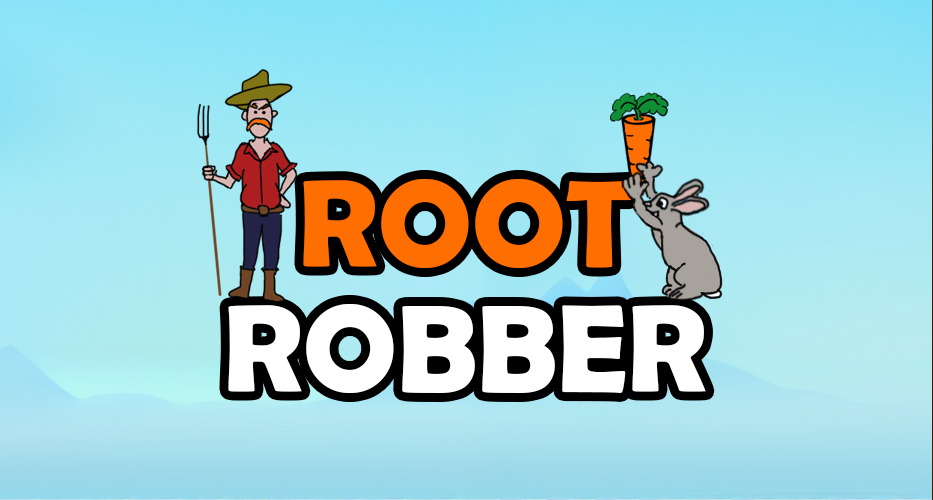
<style>
.page{position:relative;width:933px;height:500px}
.page>*{position:absolute;margin:0}
.t1{font:125px/125px "BerlinSansFBDemi-Bold";color:#ffffff}
.t2{font:125px/125px "BerlinSansFBDemi-Bold";color:#ff6e00}
</style>
<div class="page">
<p class="t1" style="left:228px;top:179px;width:478px;height:214px;text-align:center"><span class="t2">ROOT<br></span>ROBBER</p>
</div>
